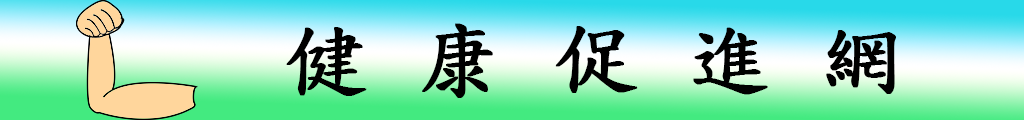
<style>
.page{position:relative;width:1024px;height:120px}
.page>*{position:absolute;margin:0}
.t1{font:83.3px "DFKaiShu-SB-Estd-BF";letter-spacing:0.025em;color:#000000;text-transform:uppercase;font-weight:bold}
</style>
<div class="page">
<p class="t1" style="left:286px;top:23px;width:610px;height:75px">健 康 促 進 網</p>
</div>
